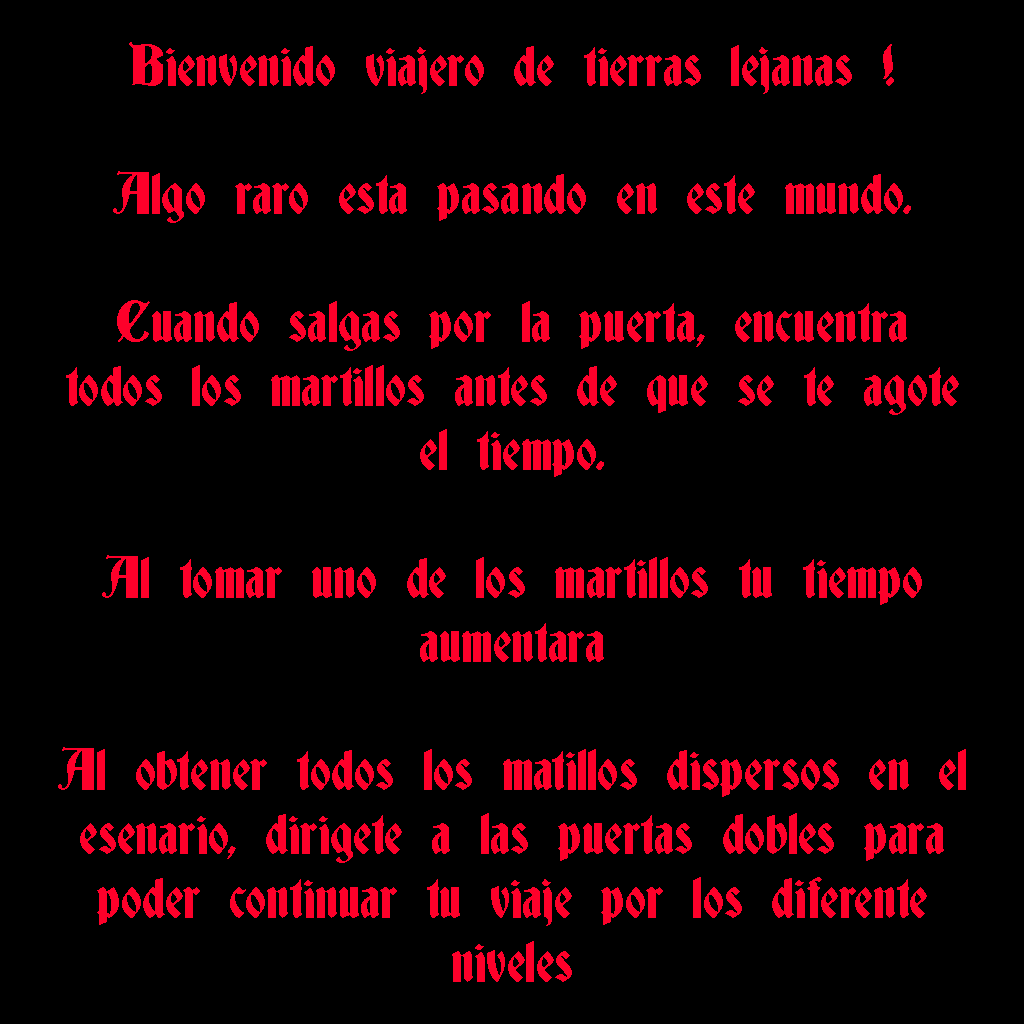
<style>
.page{position:relative;width:1024px;height:1024px;background:#000000}
.page>*{position:absolute;margin:0}
.t1{font:53.3px "Deutsch-Gothic";color:#fe002a}
</style>
<div class="page">
<p class="t1" style="left:58px;top:42px;width:908px;height:940px;text-align:center">Bienvenido viajero de tierras lejanas !<br><br>Algo raro esta pasando en este mundo.<br><br>Cuando salgas por la puerta, encuentra todos los martillos antes de que se te agote el tiempo.<br><br>Al tomar uno de los martillos tu tiempo aumentara<br><br>Al obtener todos los matillos dispersos en el esenario, dirigete a las puertas dobles para poder continuar tu viaje por los diferente niveles</p>
</div>
